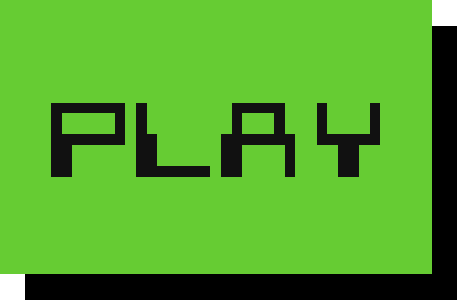
<style>
.page{position:relative;width:457px;height:300px;background:#66cc33}
.page>*{position:absolute;margin:0}
.t1{font:85.1px "G7-Silkworm-TTF";color:#111111}
</style>
<div class="page">
<p class="t1" style="left:51px;top:103px;width:329px;height:74px">PLAY</p>
</div>
